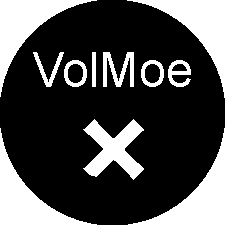
<style>
.page{position:relative;width:225px;height:225px;background:#000000}
.page>*{position:absolute;margin:0}
.t1{font:48px "ArialMT";color:#ffffff}
</style>
<div class="page">
<p class="t1" style="left:33px;top:52px;width:158px;height:35px">VolMoe</p>
</div>
